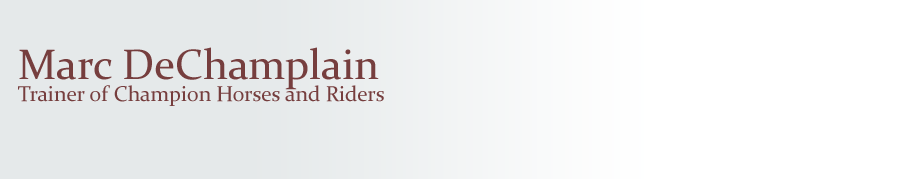
<style>
.page{position:relative;width:900px;height:179px;background:#ffffff}
.page>*{position:absolute;margin:0}
.t1{font:42.8px "Constantia";color:#763e3e}
.t2{font:21.4px "Constantia";color:#763e3e}
</style>
<div class="page">
<p class="t1" style="left:19px;top:47px;width:360px;height:43px">Marc DeChamplain</p>
<p class="t2" style="left:18px;top:85px;width:366px;height:21px">Trainer of Champion Horses and Riders</p>
</div>
